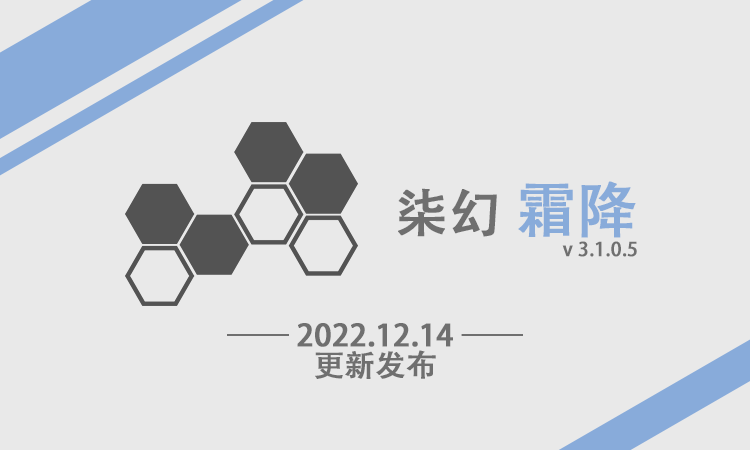
<style>
.page{position:relative;width:750px;height:450px;background:#e9e9e9}
.page>*{position:absolute;margin:0}
.t1{font:19px/60px "AdobeHeitiStd-Regular";color:#6f6f6f;font-weight:bold}
.t2{font:52px/60px "AdobeHeitiStd-Regular";color:#6f6f6f;font-weight:bold}
.t3{font:60px/60px "AdobeHeitiStd-Regular";color:#88abda;font-weight:bold}
.t4{font:30px/30px "AdobeHeitiStd-Regular";color:#6f6f6f;font-weight:bold}
</style>
<div class="page">
<p class="t1" style="left:398px;top:181px;width:239px;height:76px;text-align:right"><span class="t2">柒幻 </span><span class="t3">霜降<br></span>v 3.1.0.5</p>
<p class="t4" style="left:227px;top:323px;width:296px;height:56px;text-align:center">—— 2022.12.14 ——<br>更新发布</p>
</div>
